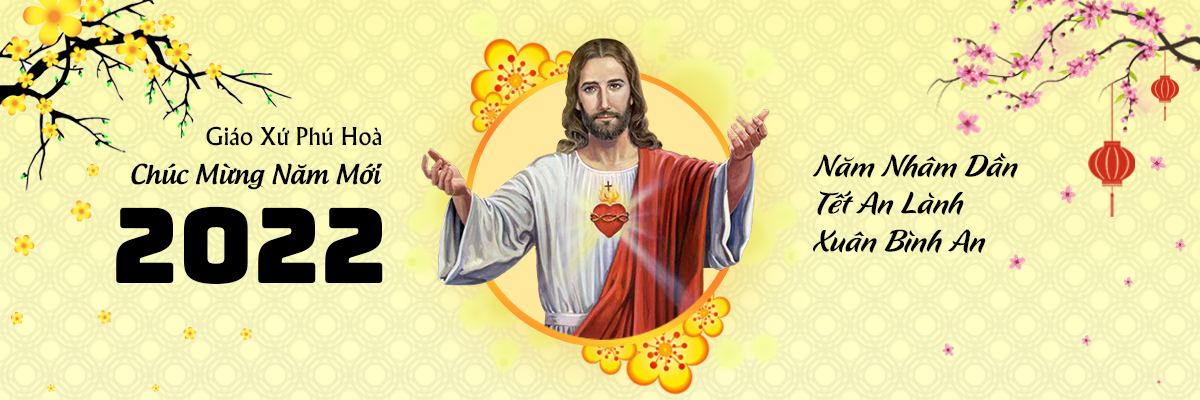
<style>
.page{position:relative;width:1200px;height:400px}
.page>*{position:absolute;margin:0}
.t1{font:26.1px "UTM-Khuccamta";color:#010101}
.t2{font:31.2px "UTM-Flavour";color:#000000}
.t3{font:26.1px "UTM-Androgyne";color:#000000}
.t4{font:104.4px "Bungee-Regular";color:#000000}
</style>
<div class="page">
<p class="t1" style="left:206px;top:126px;width:176px;height:20px">Giáo Xứ Phú Hoà</p>
<p class="t2" style="left:812px;top:152px;width:206px;height:101px">Năm Nhâm Dần<br>Tết An Lành<br>Xuân Bình An</p>
<p class="t3" style="left:131px;top:163px;width:251px;height:27px">Chúc Mừng Năm Mới</p>
<p class="t4" style="left:116px;top:206px;width:267px;height:78px">2022</p>
</div>
